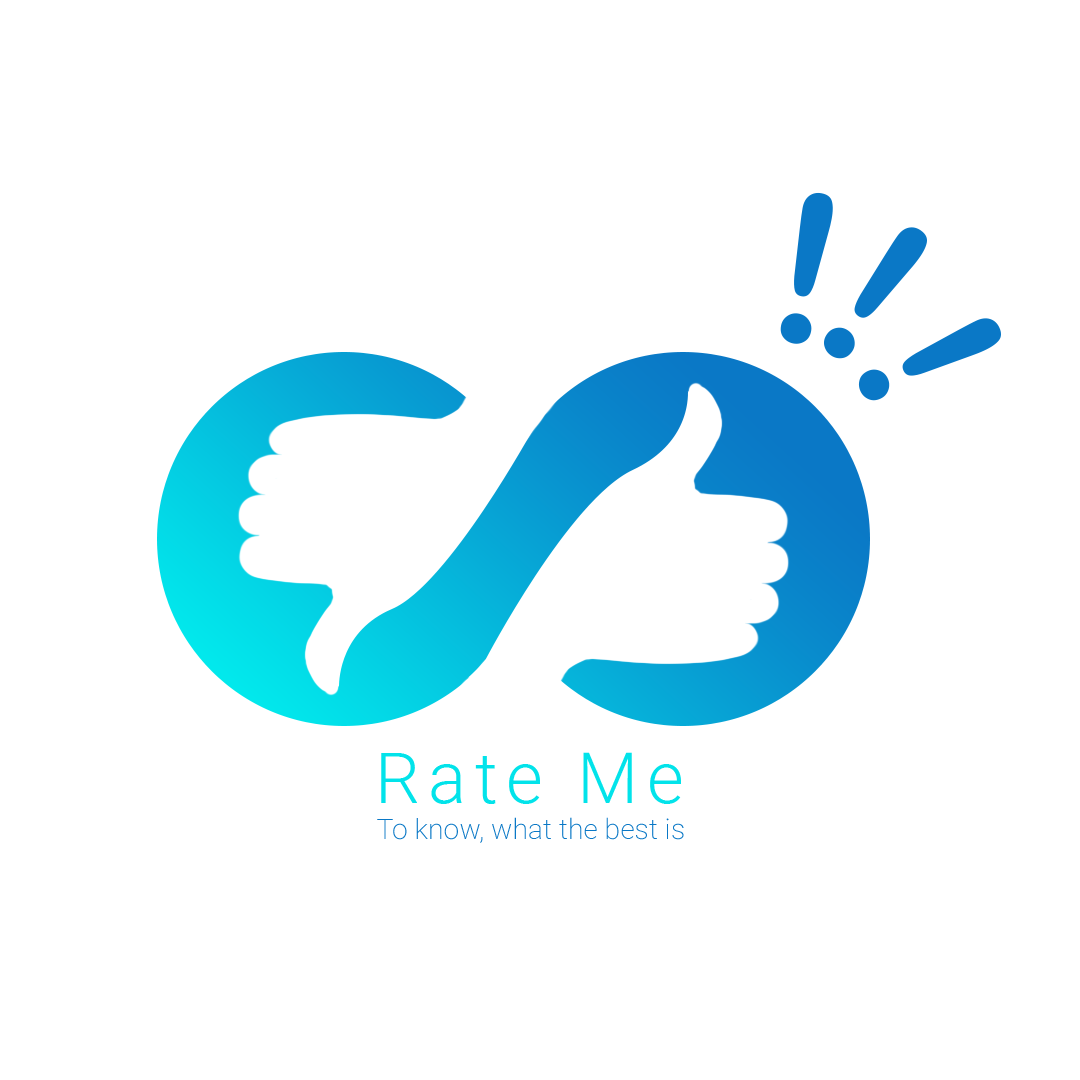
<style>
.page{position:relative;width:1080px;height:1080px;background:#ffffff}
.page>*{position:absolute;margin:0}
.t1{font:206.5px "ArialRoundedMTBold";color:#0a78c6}
.t2{font:208.1px "ArialRoundedMTBold";color:#0a78c6}
.t3{font:206.7px "ArialRoundedMTBold";color:#0a78c6}
.t4{font:70.9px "Roboto-Light";letter-spacing:0.12em;color:#02e3ea}
.t5{font:28.3px "Roboto-ExtraLight";color:#0a78c6}
</style>
<div class="page">
<p class="t1" style="left:780px;top:192px;width:53px;height:152px;rotate:10deg">!</p>
<p class="t2" style="left:824px;top:227px;width:103px;height:132px;rotate:36deg">!</p>
<p class="t3" style="left:858px;top:318px;width:143px;height:83px;rotate:65deg">!</p>
<p class="t4" style="left:381px;top:752px;width:300px;height:52px">Rate Me</p>
<p class="t5" style="left:377px;top:817px;width:307px;height:26px">To know, what the best is</p>
</div>
